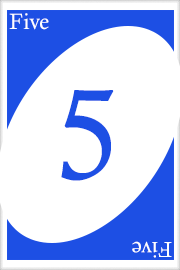
<style>
.page{position:relative;width:180px;height:270px;background:#ffffff}
.page>*{position:absolute;margin:0}
.t1{font:22px "CalistoMT";color:#ffffff}
.t2{font:128px "CalistoMT";color:#1d4fe4}
.t3{font:21.7px "CalistoMT";color:#ffffff}
</style>
<div class="page">
<p class="t1" style="left:9px;top:13px;width:40px;height:17px">Five</p>
<p class="t2" style="left:61px;top:90px;width:53px;height:91px">5</p>
<p class="t3" style="left:132px;top:241px;width:40px;height:17px;rotate:180deg">Five</p>
</div>
